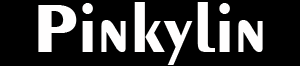
<style>
.page{position:relative;width:300px;height:66px;background:#000000}
.page>*{position:absolute;margin:0}
.t1{font:71.4px "Exotic350BT-Bold";color:#fffefe}
</style>
<div class="page">
<p class="t1" style="left:38px;top:2px;width:225px;height:63px">Pinkylin</p>
</div>
